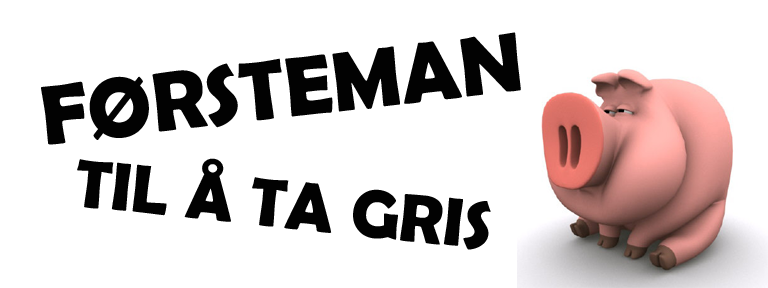
<style>
.page{position:relative;width:768px;height:288px;background:#ffffff}
.page>*{position:absolute;margin:0}
.t1{font:84.8px "BerlinSansFBDemi-Bold";color:#020202}
.t2{font:68.7px "BerlinSansFBDemi-Bold";color:#020202}
</style>
<div class="page">
<p class="t1" style="left:41px;top:32px;width:480px;height:113px;rotate:-7deg">FØRSTEMAN</p>
<p class="t2" style="left:77px;top:158px;width:414px;height:92px;rotate:6deg">TIL Å TA GRIS</p>
</div>
